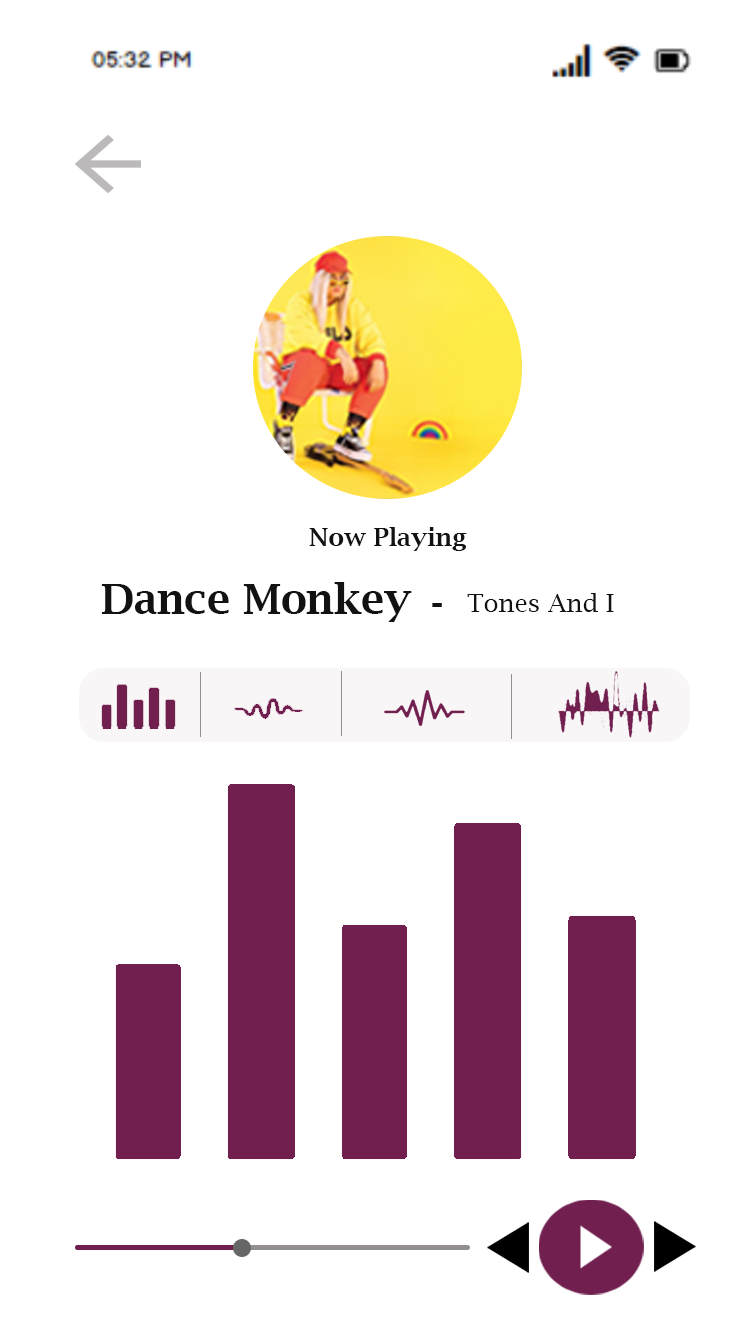
<style>
.page{position:relative;width:750px;height:1334px;background:#ffffff}
.page>*{position:absolute;margin:0}
.t1{font:25px "LucidaBright-Demi";color:#121212}
.t2{font:41.7px "LucidaBright-Demi";color:#121212}
.t3{font:25px "LucidaBright";color:#121212}
</style>
<div class="page">
<p class="t1" style="left:309px;top:527px;width:158px;height:24px">Now Playing</p>
<p class="t2" style="left:101px;top:582px;width:311px;height:40px">Dance Monkey</p>
<p class="t3" style="left:467px;top:593px;width:147px;height:19px">Tones And I</p>
<p class="t2" style="left:432px;top:603px;width:10px;height:4px">-</p>
</div>
